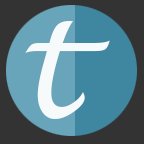
<style>
.page{position:relative;width:144px;height:144px;background:#333333}
.page>*{position:absolute;margin:0}
.t1{font:130px "LucidaHandwriting-Italic";color:#f7fafb}
</style>
<div class="page">
<p class="t1" style="left:25px;top:21px;width:85px;height:98px">t</p>
</div>
